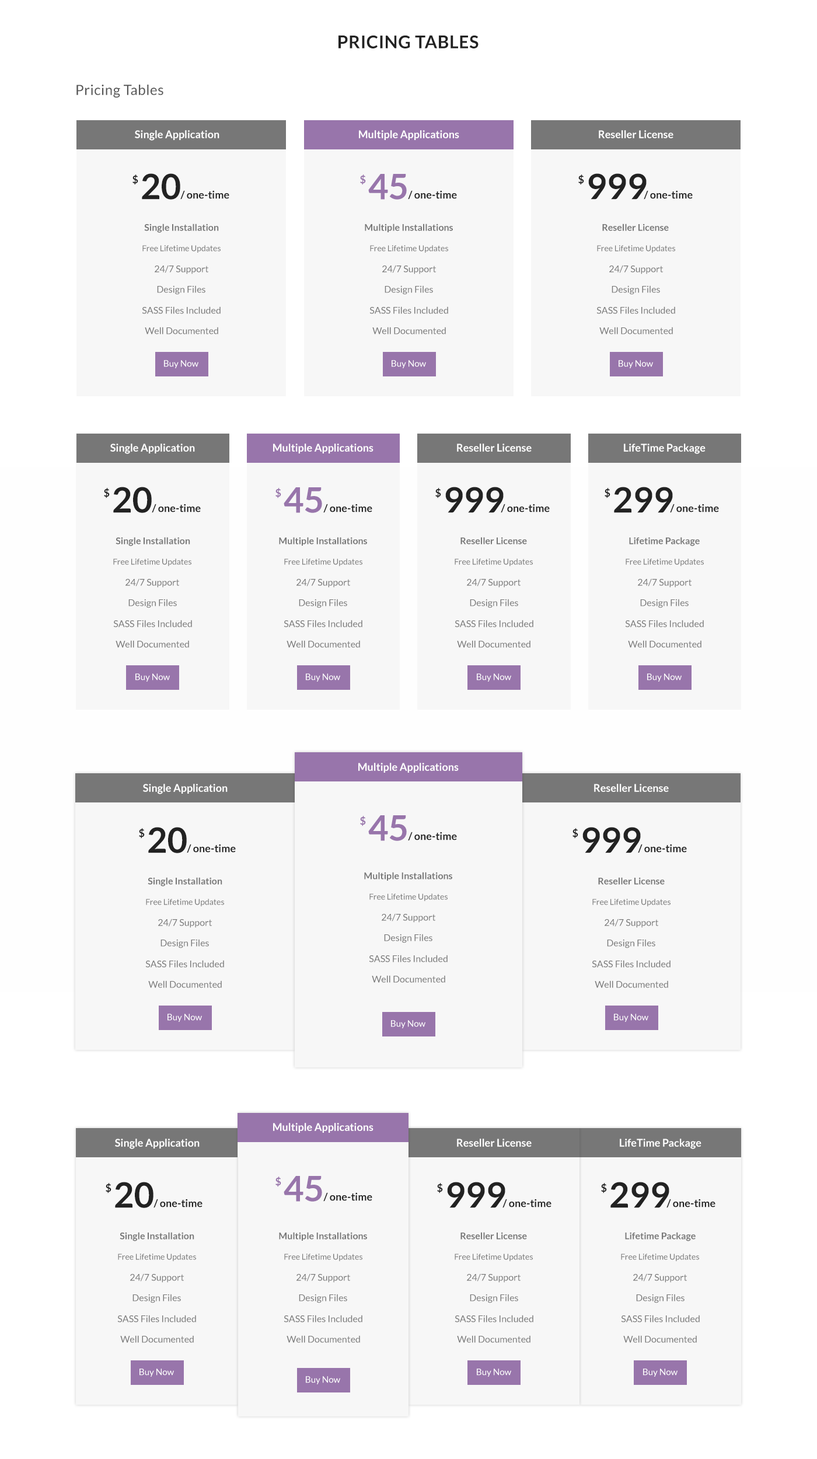
<style>
.page{position:relative;width:817px;height:1459px;background:#f7f7f7}
.page>*{position:absolute;margin:0}
.t1{font:17.5px "Lato-Bold";letter-spacing:0.025em;color:#222222}
.t2{font:14px "Lato-Regular";letter-spacing:0.025em;color:#555555}
.t3{font:10.5px "Lato-Bold";color:#ffffff}
.t4{font:35px "Lato-Bold";color:#222222}
.t5{font:35px "Lato-Bold";color:#9875ab}
.t6{font:10.5px "Lato-Bold";color:#222222}
.t7{font:10.5px "Lato-Bold";color:#9875ab}
.t8{font:9.3px "Lato-Bold";color:#777777}
.t9{font:8.2px "Lato-Regular";color:#777777}
.t10{font:9.3px "Lato-Regular";color:#777777}
.t11{font:8.8px "Lato-Regular";color:#ffffff}
</style>
<div class="page">
<p class="t1" style="left:339px;top:35px;width:140px;height:13px">PRICING TABLES</p>
<p class="t2" style="left:76px;top:85px;width:87px;height:13px">Pricing Tables</p>
<p class="t3" style="left:135px;top:130px;width:84px;height:11px">Single Application</p>
<p class="t3" style="left:359px;top:130px;width:100px;height:10px">Multiple Applications</p>
<p class="t3" style="left:599px;top:130px;width:75px;height:8px">Reseller License</p>
<p class="t4" style="left:142px;top:173px;width:38px;height:27px">20</p>
<p class="t5" style="left:368px;top:174px;width:39px;height:26px">45</p>
<p class="t4" style="left:588px;top:173px;width:59px;height:27px">999</p>
<p class="t6" style="left:132px;top:175px;width:6px;height:10px">$</p>
<p class="t7" style="left:360px;top:175px;width:6px;height:10px">$</p>
<p class="t6" style="left:578px;top:175px;width:6px;height:10px">$</p>
<p class="t6" style="left:180px;top:190px;width:49px;height:10px">/ one-time</p>
<p class="t6" style="left:408px;top:190px;width:49px;height:10px">/ one-time</p>
<p class="t6" style="left:644px;top:190px;width:49px;height:10px">/ one-time</p>
<p class="t8" style="left:144px;top:224px;width:75px;height:9px">Single Installation</p>
<p class="t8" style="left:365px;top:224px;width:88px;height:8px">Multiple Installations</p>
<p class="t8" style="left:602px;top:224px;width:67px;height:7px">Reseller License</p>
<p class="t9" style="left:142px;top:245px;width:79px;height:8px">Free Lifetime Updates</p>
<p class="t9" style="left:370px;top:245px;width:78px;height:8px">Free Lifetime Updates</p>
<p class="t9" style="left:597px;top:245px;width:78px;height:8px">Free Lifetime Updates</p>
<p class="t10" style="left:155px;top:265px;width:53px;height:9px">24/7 Support</p>
<p class="t10" style="left:382px;top:265px;width:54px;height:9px">24/7 Support</p>
<p class="t10" style="left:609px;top:265px;width:54px;height:9px">24/7 Support</p>
<p class="t10" style="left:157px;top:285px;width:48px;height:10px">Design Files</p>
<p class="t10" style="left:385px;top:285px;width:48px;height:10px">Design Files</p>
<p class="t10" style="left:612px;top:285px;width:48px;height:10px">Design Files</p>
<p class="t10" style="left:142px;top:306px;width:79px;height:8px">SASS Files Included</p>
<p class="t10" style="left:369px;top:306px;width:79px;height:8px">SASS Files Included</p>
<p class="t10" style="left:597px;top:306px;width:78px;height:8px">SASS Files Included</p>
<p class="t10" style="left:145px;top:327px;width:73px;height:7px">Well Documented</p>
<p class="t10" style="left:372px;top:327px;width:74px;height:7px">Well Documented</p>
<p class="t10" style="left:599px;top:327px;width:74px;height:7px">Well Documented</p>
<p class="t11" style="left:164px;top:360px;width:34px;height:8px">Buy Now</p>
<p class="t11" style="left:392px;top:360px;width:34px;height:8px">Buy Now</p>
<p class="t11" style="left:619px;top:360px;width:34px;height:8px">Buy Now</p>
<p class="t3" style="left:110px;top:444px;width:85px;height:10px">Single Application</p>
<p class="t3" style="left:273px;top:444px;width:101px;height:10px">Multiple Applications</p>
<p class="t3" style="left:457px;top:444px;width:75px;height:8px">Reseller License</p>
<p class="t3" style="left:624px;top:444px;width:82px;height:10px">LifeTime Package</p>
<p class="t6" style="left:104px;top:488px;width:6px;height:10px">$</p>
<p class="t4" style="left:113px;top:487px;width:39px;height:26px">20</p>
<p class="t7" style="left:276px;top:488px;width:5px;height:10px">$</p>
<p class="t5" style="left:284px;top:487px;width:38px;height:26px">45</p>
<p class="t6" style="left:435px;top:488px;width:6px;height:10px">$</p>
<p class="t4" style="left:445px;top:487px;width:59px;height:26px">999</p>
<p class="t6" style="left:605px;top:488px;width:6px;height:10px">$</p>
<p class="t4" style="left:614px;top:487px;width:59px;height:26px">299</p>
<p class="t6" style="left:152px;top:504px;width:49px;height:9px">/ one-time</p>
<p class="t6" style="left:323px;top:504px;width:49px;height:9px">/ one-time</p>
<p class="t6" style="left:501px;top:504px;width:49px;height:9px">/ one-time</p>
<p class="t6" style="left:670px;top:504px;width:49px;height:9px">/ one-time</p>
<p class="t8" style="left:116px;top:537px;width:74px;height:9px">Single Installation</p>
<p class="t8" style="left:279px;top:537px;width:88px;height:9px">Multiple Installations</p>
<p class="t8" style="left:461px;top:537px;width:66px;height:8px">Reseller License</p>
<p class="t8" style="left:629px;top:537px;width:71px;height:9px">Lifetime Package</p>
<p class="t9" style="left:113px;top:559px;width:78px;height:7px">Free Lifetime Updates</p>
<p class="t9" style="left:284px;top:559px;width:78px;height:7px">Free Lifetime Updates</p>
<p class="t9" style="left:455px;top:559px;width:78px;height:7px">Free Lifetime Updates</p>
<p class="t9" style="left:626px;top:559px;width:78px;height:7px">Free Lifetime Updates</p>
<p class="t10" style="left:125px;top:578px;width:54px;height:10px">24/7 Support</p>
<p class="t10" style="left:297px;top:578px;width:53px;height:10px">24/7 Support</p>
<p class="t10" style="left:467px;top:578px;width:54px;height:10px">24/7 Support</p>
<p class="t10" style="left:638px;top:578px;width:54px;height:10px">24/7 Support</p>
<p class="t10" style="left:128px;top:599px;width:49px;height:9px">Design Files</p>
<p class="t10" style="left:299px;top:599px;width:48px;height:9px">Design Files</p>
<p class="t10" style="left:470px;top:599px;width:48px;height:9px">Design Files</p>
<p class="t10" style="left:640px;top:599px;width:49px;height:9px">Design Files</p>
<p class="t10" style="left:113px;top:620px;width:79px;height:7px">SASS Files Included</p>
<p class="t10" style="left:284px;top:620px;width:78px;height:7px">SASS Files Included</p>
<p class="t10" style="left:455px;top:620px;width:78px;height:7px">SASS Files Included</p>
<p class="t10" style="left:625px;top:620px;width:79px;height:7px">SASS Files Included</p>
<p class="t10" style="left:116px;top:640px;width:73px;height:8px">Well Documented</p>
<p class="t10" style="left:287px;top:640px;width:73px;height:8px">Well Documented</p>
<p class="t10" style="left:457px;top:640px;width:74px;height:8px">Well Documented</p>
<p class="t10" style="left:628px;top:640px;width:74px;height:8px">Well Documented</p>
<p class="t11" style="left:135px;top:674px;width:35px;height:8px">Buy Now</p>
<p class="t11" style="left:306px;top:674px;width:34px;height:8px">Buy Now</p>
<p class="t11" style="left:477px;top:674px;width:34px;height:8px">Buy Now</p>
<p class="t11" style="left:647px;top:674px;width:35px;height:8px">Buy Now</p>
<p class="t3" style="left:358px;top:763px;width:101px;height:10px">Multiple Applications</p>
<p class="t3" style="left:143px;top:784px;width:85px;height:10px">Single Application</p>
<p class="t3" style="left:594px;top:784px;width:75px;height:8px">Reseller License</p>
<p class="t7" style="left:360px;top:816px;width:6px;height:11px">$</p>
<p class="t5" style="left:368px;top:815px;width:39px;height:26px">45</p>
<p class="t6" style="left:139px;top:828px;width:6px;height:11px">$</p>
<p class="t4" style="left:148px;top:827px;width:39px;height:26px">20</p>
<p class="t6" style="left:408px;top:832px;width:49px;height:9px">/ one-time</p>
<p class="t6" style="left:573px;top:828px;width:5px;height:11px">$</p>
<p class="t4" style="left:583px;top:827px;width:58px;height:26px">999</p>
<p class="t6" style="left:187px;top:844px;width:49px;height:9px">/ one-time</p>
<p class="t6" style="left:638px;top:844px;width:49px;height:9px">/ one-time</p>
<p class="t8" style="left:148px;top:877px;width:74px;height:10px">Single Installation</p>
<p class="t8" style="left:364px;top:872px;width:88px;height:9px">Multiple Installations</p>
<p class="t8" style="left:598px;top:877px;width:67px;height:8px">Reseller License</p>
<p class="t9" style="left:369px;top:894px;width:79px;height:7px">Free Lifetime Updates</p>
<p class="t9" style="left:146px;top:899px;width:78px;height:7px">Free Lifetime Updates</p>
<p class="t9" style="left:592px;top:899px;width:79px;height:7px">Free Lifetime Updates</p>
<p class="t10" style="left:382px;top:913px;width:53px;height:10px">24/7 Support</p>
<p class="t10" style="left:158px;top:919px;width:54px;height:9px">24/7 Support</p>
<p class="t10" style="left:605px;top:919px;width:53px;height:9px">24/7 Support</p>
<p class="t10" style="left:161px;top:939px;width:48px;height:9px">Design Files</p>
<p class="t10" style="left:384px;top:934px;width:49px;height:9px">Design Files</p>
<p class="t10" style="left:607px;top:939px;width:48px;height:9px">Design Files</p>
<p class="t10" style="left:145px;top:960px;width:79px;height:8px">SASS Files Included</p>
<p class="t10" style="left:369px;top:955px;width:79px;height:8px">SASS Files Included</p>
<p class="t10" style="left:592px;top:960px;width:79px;height:8px">SASS Files Included</p>
<p class="t10" style="left:372px;top:975px;width:73px;height:8px">Well Documented</p>
<p class="t10" style="left:148px;top:981px;width:74px;height:7px">Well Documented</p>
<p class="t10" style="left:595px;top:981px;width:73px;height:7px">Well Documented</p>
<p class="t11" style="left:168px;top:1014px;width:34px;height:8px">Buy Now</p>
<p class="t11" style="left:614px;top:1014px;width:34px;height:8px">Buy Now</p>
<p class="t11" style="left:391px;top:1020px;width:35px;height:8px">Buy Now</p>
<p class="t3" style="left:273px;top:1123px;width:101px;height:10px">Multiple Applications</p>
<p class="t3" style="left:115px;top:1139px;width:85px;height:10px">Single Application</p>
<p class="t3" style="left:457px;top:1139px;width:75px;height:8px">Reseller License</p>
<p class="t3" style="left:620px;top:1139px;width:82px;height:10px">LifeTime Package</p>
<p class="t4" style="left:115px;top:1182px;width:39px;height:26px">20</p>
<p class="t7" style="left:276px;top:1177px;width:5px;height:10px">$</p>
<p class="t5" style="left:284px;top:1176px;width:38px;height:26px">45</p>
<p class="t4" style="left:447px;top:1182px;width:58px;height:26px">999</p>
<p class="t4" style="left:611px;top:1182px;width:58px;height:26px">299</p>
<p class="t6" style="left:106px;top:1183px;width:5px;height:11px">$</p>
<p class="t6" style="left:323px;top:1192px;width:49px;height:10px">/ one-time</p>
<p class="t6" style="left:437px;top:1183px;width:6px;height:11px">$</p>
<p class="t6" style="left:601px;top:1183px;width:6px;height:11px">$</p>
<p class="t6" style="left:154px;top:1199px;width:49px;height:9px">/ one-time</p>
<p class="t6" style="left:503px;top:1199px;width:49px;height:9px">/ one-time</p>
<p class="t6" style="left:667px;top:1199px;width:49px;height:9px">/ one-time</p>
<p class="t8" style="left:120px;top:1232px;width:74px;height:10px">Single Installation</p>
<p class="t8" style="left:279px;top:1232px;width:88px;height:9px">Multiple Installations</p>
<p class="t8" style="left:461px;top:1232px;width:66px;height:8px">Reseller License</p>
<p class="t8" style="left:625px;top:1232px;width:71px;height:10px">Lifetime Package</p>
<p class="t9" style="left:118px;top:1254px;width:78px;height:7px">Free Lifetime Updates</p>
<p class="t9" style="left:284px;top:1254px;width:78px;height:7px">Free Lifetime Updates</p>
<p class="t9" style="left:455px;top:1254px;width:78px;height:7px">Free Lifetime Updates</p>
<p class="t9" style="left:621px;top:1254px;width:78px;height:7px">Free Lifetime Updates</p>
<p class="t10" style="left:130px;top:1274px;width:54px;height:9px">24/7 Support</p>
<p class="t10" style="left:297px;top:1274px;width:53px;height:9px">24/7 Support</p>
<p class="t10" style="left:467px;top:1274px;width:54px;height:9px">24/7 Support</p>
<p class="t10" style="left:633px;top:1274px;width:54px;height:9px">24/7 Support</p>
<p class="t10" style="left:132px;top:1294px;width:49px;height:9px">Design Files</p>
<p class="t10" style="left:299px;top:1294px;width:48px;height:9px">Design Files</p>
<p class="t10" style="left:470px;top:1294px;width:48px;height:9px">Design Files</p>
<p class="t10" style="left:636px;top:1294px;width:49px;height:9px">Design Files</p>
<p class="t10" style="left:117px;top:1315px;width:79px;height:8px">SASS Files Included</p>
<p class="t10" style="left:284px;top:1315px;width:78px;height:8px">SASS Files Included</p>
<p class="t10" style="left:455px;top:1315px;width:78px;height:8px">SASS Files Included</p>
<p class="t10" style="left:621px;top:1315px;width:79px;height:8px">SASS Files Included</p>
<p class="t10" style="left:120px;top:1335px;width:74px;height:8px">Well Documented</p>
<p class="t10" style="left:287px;top:1335px;width:73px;height:8px">Well Documented</p>
<p class="t10" style="left:457px;top:1335px;width:74px;height:8px">Well Documented</p>
<p class="t10" style="left:623px;top:1335px;width:74px;height:8px">Well Documented</p>
<p class="t11" style="left:140px;top:1369px;width:34px;height:8px">Buy Now</p>
<p class="t11" style="left:477px;top:1369px;width:34px;height:8px">Buy Now</p>
<p class="t11" style="left:643px;top:1369px;width:35px;height:8px">Buy Now</p>
<p class="t11" style="left:306px;top:1376px;width:34px;height:9px">Buy Now</p>
</div>
